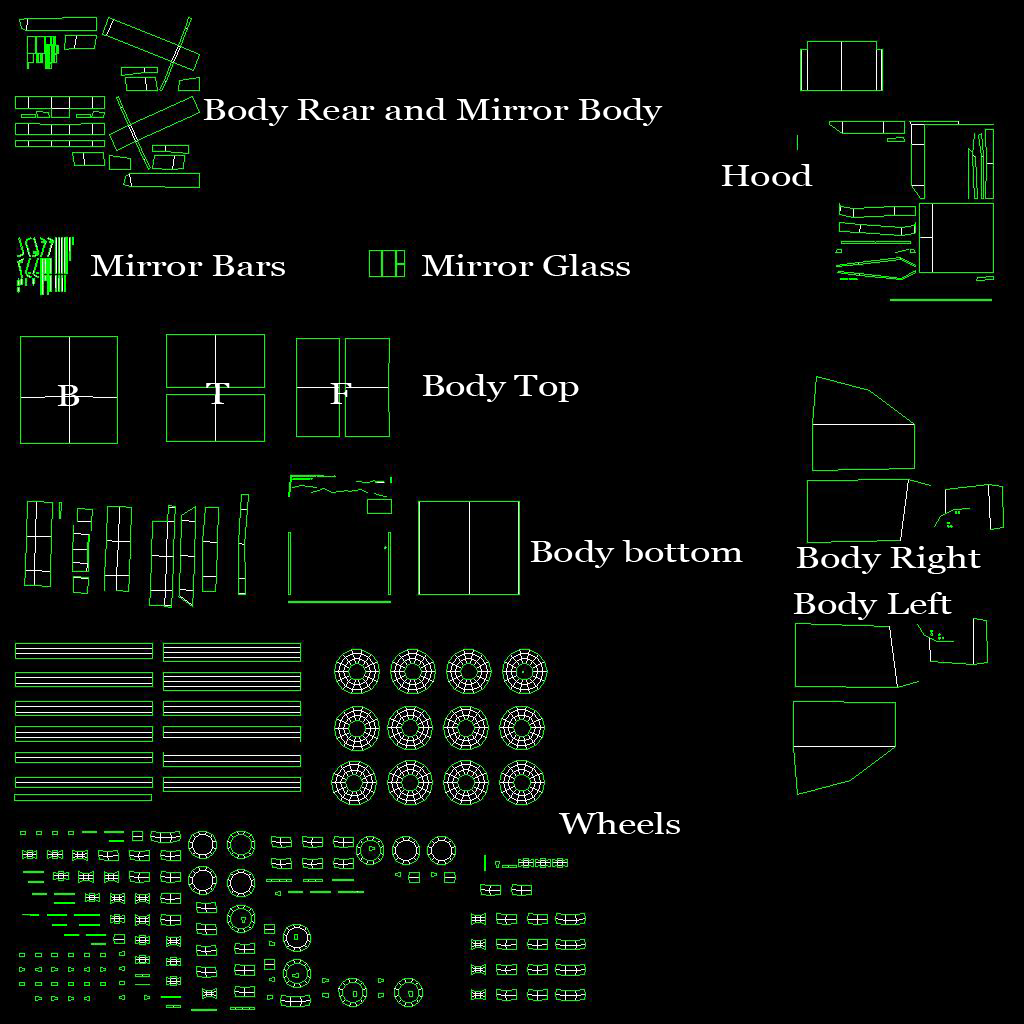
<style>
.page{position:relative;width:1024px;height:1024px;background:#000000}
.page>*{position:absolute;margin:0}
.t1{font:28.9px "Georgia";color:#ffffff;scale:1.3 1}
</style>
<div class="page">
<p class="t1" style="left:203px;top:98px;width:460px;height:28px">Body Rear and Mirror Body</p>
<p class="t1" style="left:721px;top:164px;width:92px;height:22px">Hood</p>
<p class="t1" style="left:90px;top:254px;width:195px;height:22px">Mirror Bars</p>
<p class="t1" style="left:421px;top:254px;width:209px;height:22px">Mirror Glass</p>
<p class="t1" style="left:422px;top:374px;width:157px;height:28px">Body Top</p>
<p class="t1" style="left:57px;top:385px;width:23px;height:21px">B</p>
<p class="t1" style="left:206px;top:383px;width:24px;height:21px">T</p>
<p class="t1" style="left:330px;top:383px;width:22px;height:21px">F</p>
<p class="t1" style="left:530px;top:540px;width:213px;height:28px">Body bottom</p>
<p class="t1" style="left:796px;top:546px;width:185px;height:28px">Body Right</p>
<p class="t1" style="left:793px;top:592px;width:159px;height:28px">Body Left</p>
<p class="t1" style="left:558px;top:812px;width:122px;height:22px">Wheels</p>
</div>
